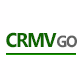
<style>
.page{position:relative;width:80px;height:80px;background:#ffffff}
.page>*{position:absolute;margin:0}
.t1{font:20px "SegoeUI-Bold";letter-spacing:-0.075em;color:#0e6500;scale:0.95 1}
.t2{font:16px "SegoeUI-Bold";letter-spacing:-0.075em;color:#626262;scale:0.95 1}
</style>
<div class="page">
<p class="t1" style="left:6px;top:32px;width:51px;height:16px">CRMV</p>
<p class="t2" style="left:57px;top:35px;width:20px;height:13px">GO</p>
</div>
